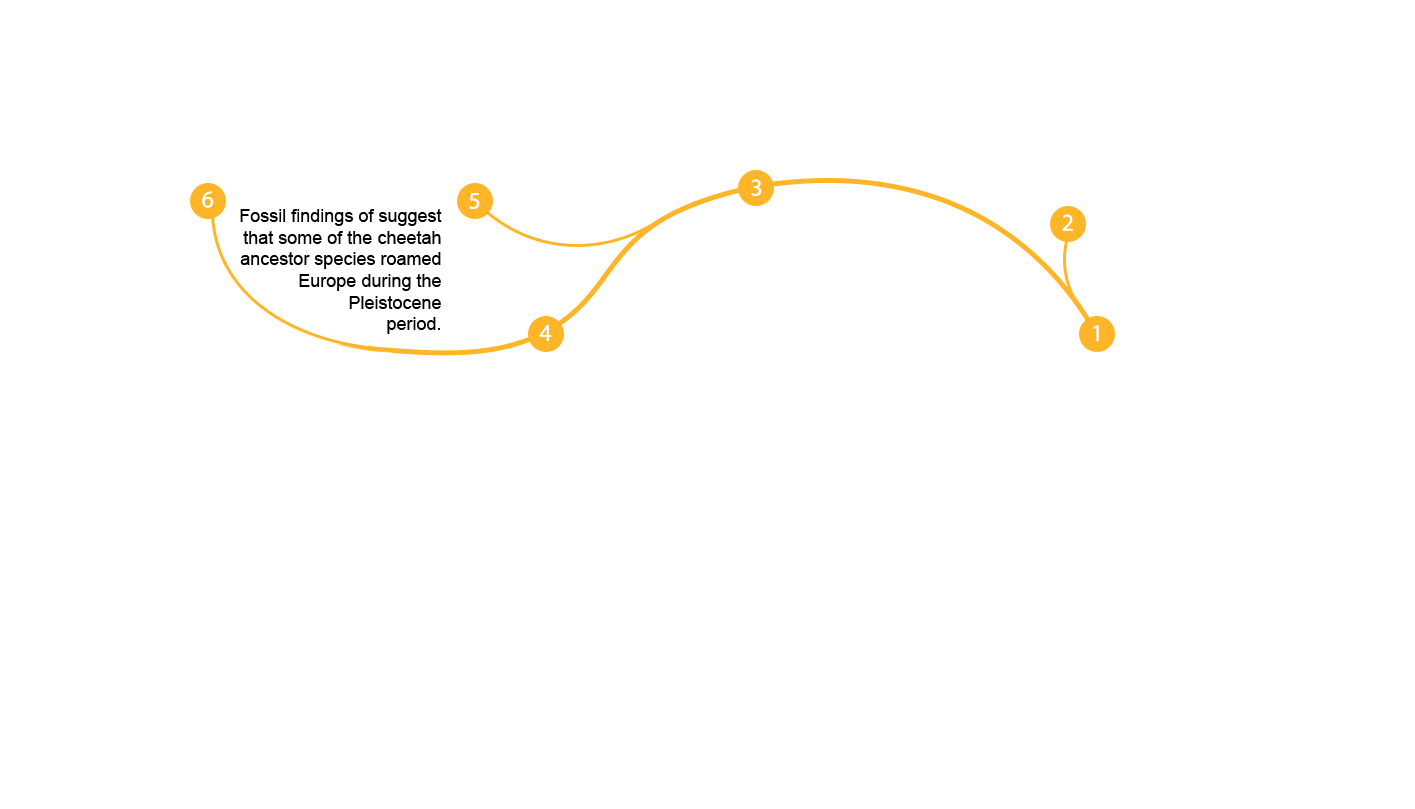
<style>
.page{position:relative;width:1415px;height:809px;background:#ffffff}
.page>*{position:absolute;margin:0}
.t1{font:18px "ArialMT";color:#000000}
</style>
<div class="page">
<p class="t1" style="left:240px;top:209px;width:202px;height:125px;text-align:right">Fossil findings of suggest<br>that some of the cheetah<br>ancestor species roamed<br>Europe during the<br>Pleistocene<br>period.</p>
</div>
